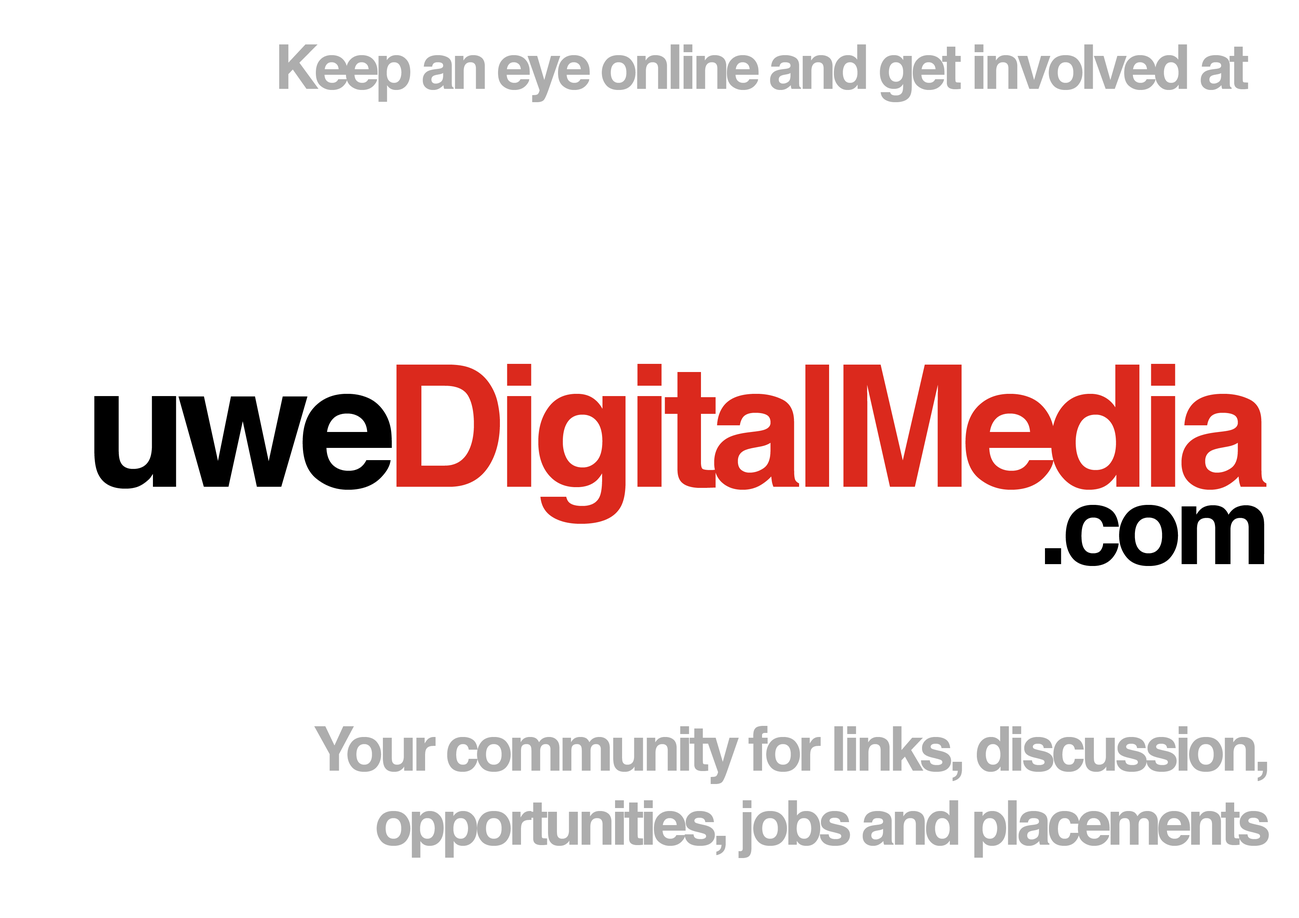
<style>
.page{position:relative;width:1299px;height:918px;background:#ffffff}
.page>*{position:absolute;margin:0}
.t1{font:61.7px "Helvetica-Bold";letter-spacing:-0.07em;color:#adadad}
.t2{font:169.7px/154.3px "Helvetica-Bold";letter-spacing:-0.06em;color:#db291d}
.t3{font:169.7px/154.3px "Helvetica-Bold";letter-spacing:-0.06em;color:#000000}
.t4{font:108px/77.1px "Helvetica-Bold";letter-spacing:-0.06em;color:#000000}
.t5{font:61.7px/74px "Helvetica-Bold";letter-spacing:-0.07em;color:#adadad}
</style>
<div class="page">
<p class="t1" style="left:279px;top:44px;width:969px;height:58px">Keep an eye online and get involved at</p>
<p class="t2" style="left:94px;top:364px;width:1172px;height:202px;text-align:right"><span class="t3">uwe</span>DigitalMedia<br><span class="t4">.com</span></p>
<p class="t5" style="left:314px;top:726px;width:955px;height:132px;text-align:right">Your community for links, discussion, opportunities, jobs and placements</p>
</div>
